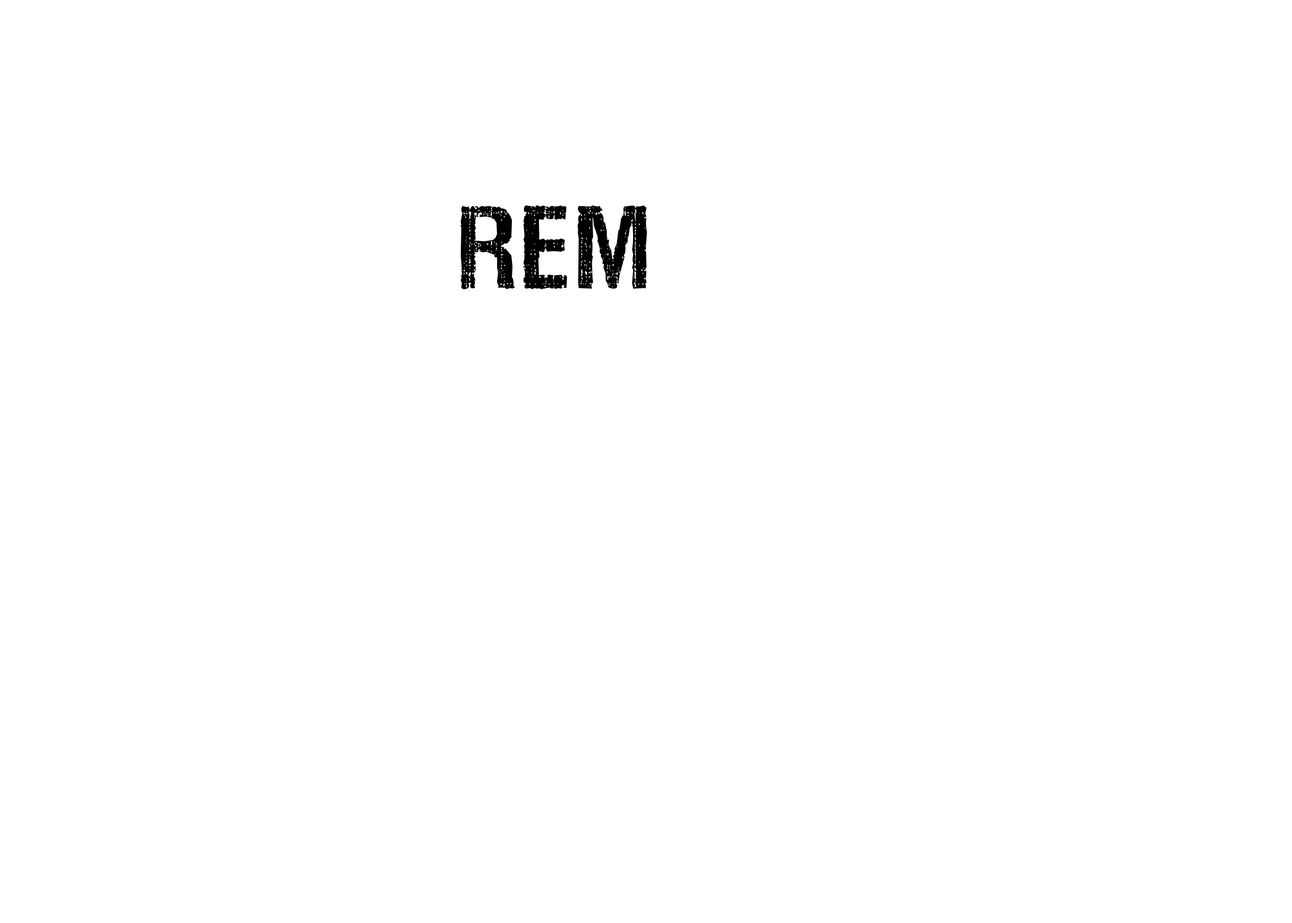
<style>
.page{position:relative;width:1292px;height:923px;background:#ffffff}
.page>*{position:absolute;margin:0}
.t1{font:128.2px "New";color:#000000}
</style>
<div class="page">
<p class="t1" style="left:460px;top:205px;width:187px;height:84px">REM</p>
</div>
